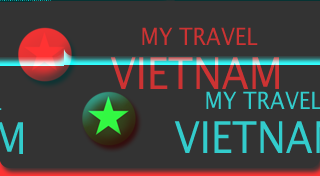
<style>
.page{position:relative;width:320px;height:176px;background:#333333}
.page>*{position:absolute;margin:0}
.t1{font:24px "LucidaSansUnicode";color:#cc3333;scale:0.89 1}
.t2{font:44px "LucidaSansUnicode";scale:0.89 1}
</style>
<div class="page">
<p class="t1" style="left:142px;top:26px;width:116px;height:18px">MY TRAVEL</p>
<p class="t2" style="left:110px;top:56px;width:169px;height:32px">VIETNAM</p>
</div>
